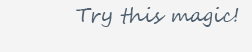
<style>
.page{position:relative;width:252px;height:52px;background:#f4f4f5}
.page>*{position:absolute;margin:0}
.t1{font:20px "SegoeScript";color:#506271}
</style>
<div class="page">
<p class="t1" style="left:76px;top:7px;width:163px;height:20px">Try this magic!</p>
</div>
